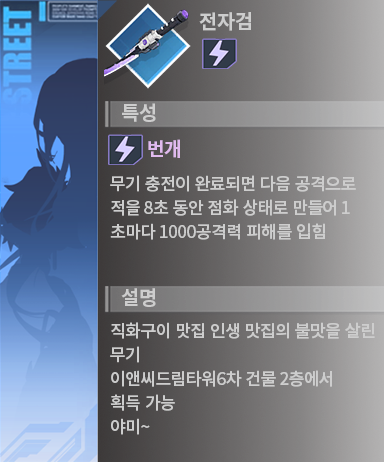
<style>
.page{position:relative;width:384px;height:462px}
.page>*{position:absolute;margin:0}
.t1{font:20px "NotoSansCJKkr-Bold";letter-spacing:-0.025em;color:#cdcdcd}
.t2{font:19px "NotoSansCJKkr-Bold";letter-spacing:-0.025em;color:#e0baee}
.t3{font:17px/24px "NotoSansKR-Medium";letter-spacing:-0.025em;color:#cdcdcd}
</style>
<div class="page">
<p class="t1" style="left:199px;top:12px;width:52px;height:19px">전자검</p>
<p class="t1" style="left:122px;top:103px;width:34px;height:19px">특성</p>
<p class="t2" style="left:148px;top:139px;width:32px;height:19px">번개</p>
<p class="t3" style="left:110px;top:175px;width:246px;height:65px">무기 충전이 완료되면 다음 공격으로<br>적을 8초 동안 점화 상태로 만들어 1초마다 1000공격력 피해를 입힘</p>
<p class="t1" style="left:121px;top:288px;width:35px;height:19px">설명</p>
<p class="t3" style="left:110px;top:322px;width:265px;height:113px">직화구이 맛집 인생 맛집의 불맛을 살린 무기<br>이앤씨드림타워6차 건물 2층에서<br>획득 가능<br>야미~</p>
</div>
